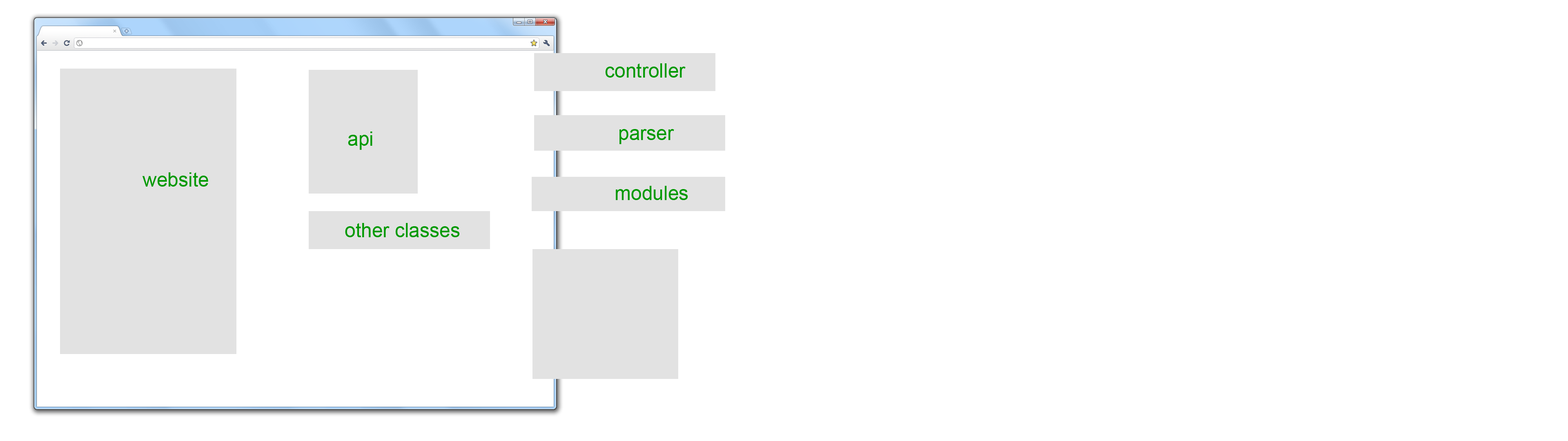
<style>
.page{position:relative;width:1568px;height:441px;background:#ffffff}
.page>*{position:absolute;margin:0}
.t1{font:19.6px "ArialMT";color:#009900}
</style>
<div class="page">
<p class="t1" style="left:605px;top:63px;width:81px;height:15px">controller</p>
<p class="t1" style="left:348px;top:131px;width:24px;height:19px">api</p>
<p class="t1" style="left:619px;top:129px;width:55px;height:15px">parser</p>
<p class="t1" style="left:142px;top:172px;width:66px;height:15px">website</p>
<p class="t1" style="left:616px;top:186px;width:72px;height:14px">modules</p>
<p class="t1" style="left:345px;top:223px;width:115px;height:14px">other classes</p>
</div>
